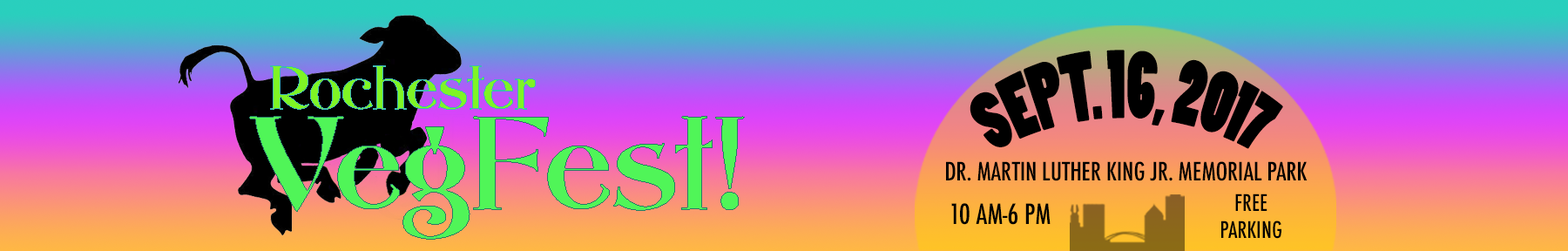
<style>
.page{position:relative;width:1568px;height:251px}
.page>*{position:absolute;margin:0}
.t1{font:54.8px "PoplarStd";color:#000000}
.t2{font:24.7px "Futura-CondensedMedium";color:#000000}
.t3{font:22.2px "Futura-CondensedMedium";color:#000000}
.t4{font:27.1px "Futura-CondensedMedium";color:#000000}
</style>
<div class="page">
<p class="t1" style="left:970px;top:50px;width:313px;height:99px;text-align:center">SEPT. 16, 2017</p>
<p class="t2" style="left:946px;top:161px;width:362px;height:20px">DR. MARTIN LUTHER KING JR. MEMORIAL PARK</p>
<p class="t3" style="left:1221px;top:193px;width:60px;height:46px;text-align:center">FREE  <br>PARKING</p>
<p class="t4" style="left:951px;top:203px;width:100px;height:22px">10 AM-6 PM</p>
</div>
